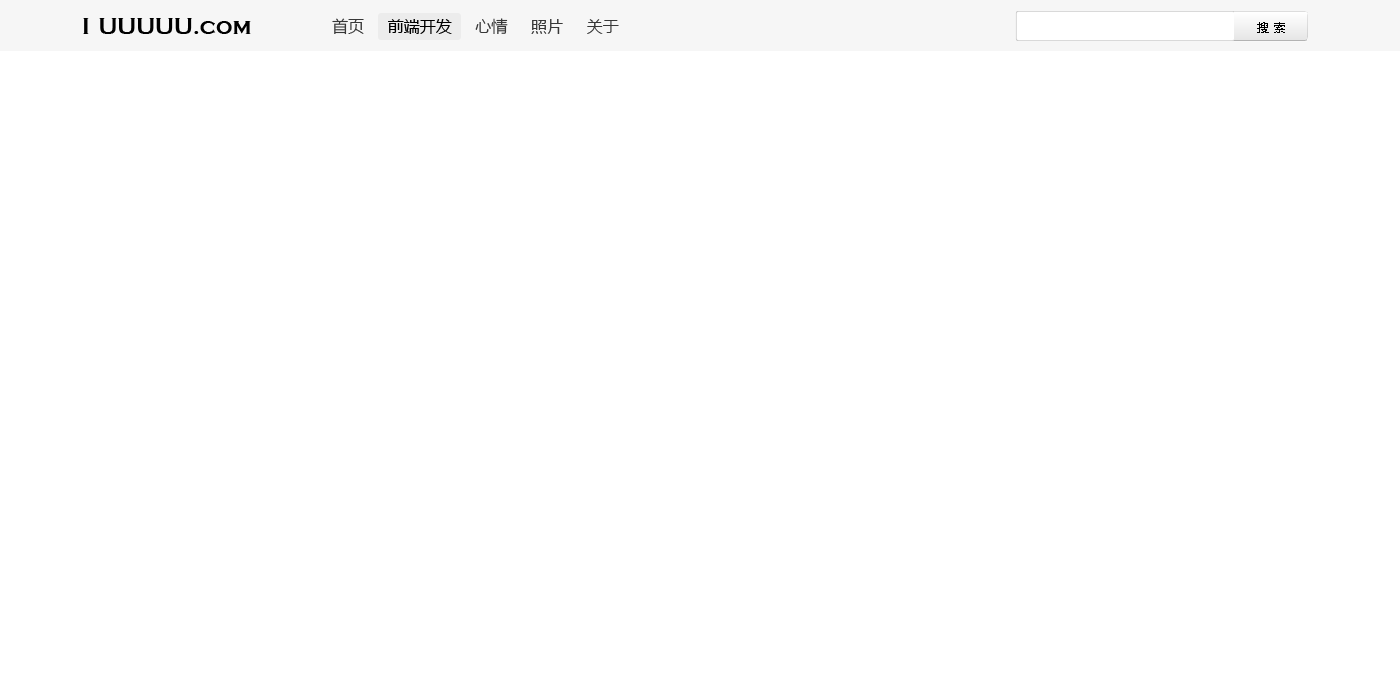
<style>
.page{position:relative;width:1400px;height:700px;background:#ffffff}
.page>*{position:absolute;margin:0}
.t1{font:16px "MicrosoftYaHei";color:#383838}
.t2{font:16px "MicrosoftYaHei";color:#000000}
.t3{font:12px "MicrosoftYaHei";color:#000000}
</style>
<div class="page">
<p class="t1" style="left:332px;top:18px;width:287px;height:17px">首页     <span class="t2">前端开发     </span>心情     照片     关于</p>
<p class="t3" style="left:1257px;top:22px;width:28px;height:11px">搜 索</p>
</div>
